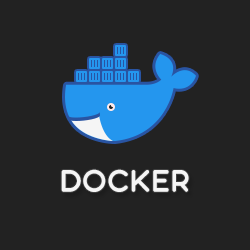
<style>
.page{position:relative;width:250px;height:250px;background:#222222}
.page>*{position:absolute;margin:0}
.t1{font:34px "AristotelicaDisplayTrial-DemiBo";letter-spacing:0.025em;color:#f5f5f5;font-variant:small-caps}
</style>
<div class="page">
<p class="t1" style="left:61px;top:169px;width:128px;height:23px">DOCKER</p>
</div>
